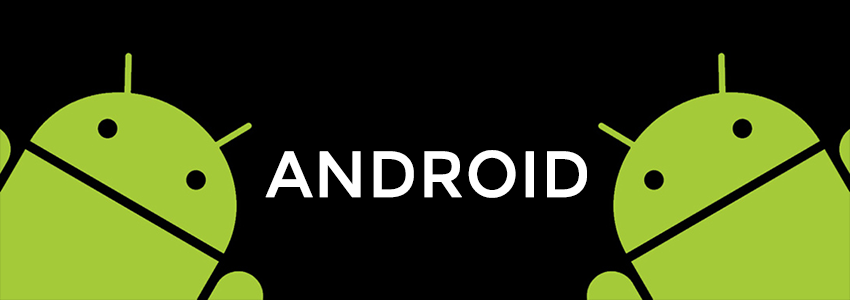
<style>
.page{position:relative;width:850px;height:300px;background:#000000}
.page>*{position:absolute;margin:0}
.t1{font:65px "Montserrat-Regular";color:#ffffff;font-weight:bold;scale:0.96 1}
</style>
<div class="page">
<p class="t1" style="left:265px;top:150px;width:322px;height:48px">ANDROID</p>
</div>
